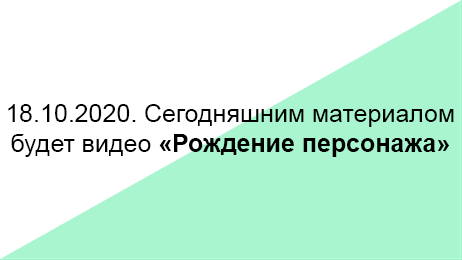
<style>
.page{position:relative;width:462px;height:260px;background:#ffffff}
.page>*{position:absolute;margin:0}
.t1{font:25px "ArialMT";color:#000000}
.t2{font:25px "Arial-BoldMT";color:#000000}
</style>
<div class="page">
<p class="t1" style="left:8px;top:104px;width:446px;height:53px;text-align:center">18.10.2020. Сегодняшним материалом<br>будет видео <span class="t2">«Рождение персонажа»</span></p>
</div>
